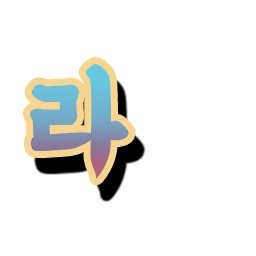
<style>
.page{position:relative;width:256px;height:256px;background:#ffffff}
.page>*{position:absolute;margin:0}
.t1{font:125px "BMEULJIROTTF";letter-spacing:0.22em}
</style>
<div class="page">
<p class="t1" style="left:30px;top:64px;width:99px;height:115px">라</p>
</div>
